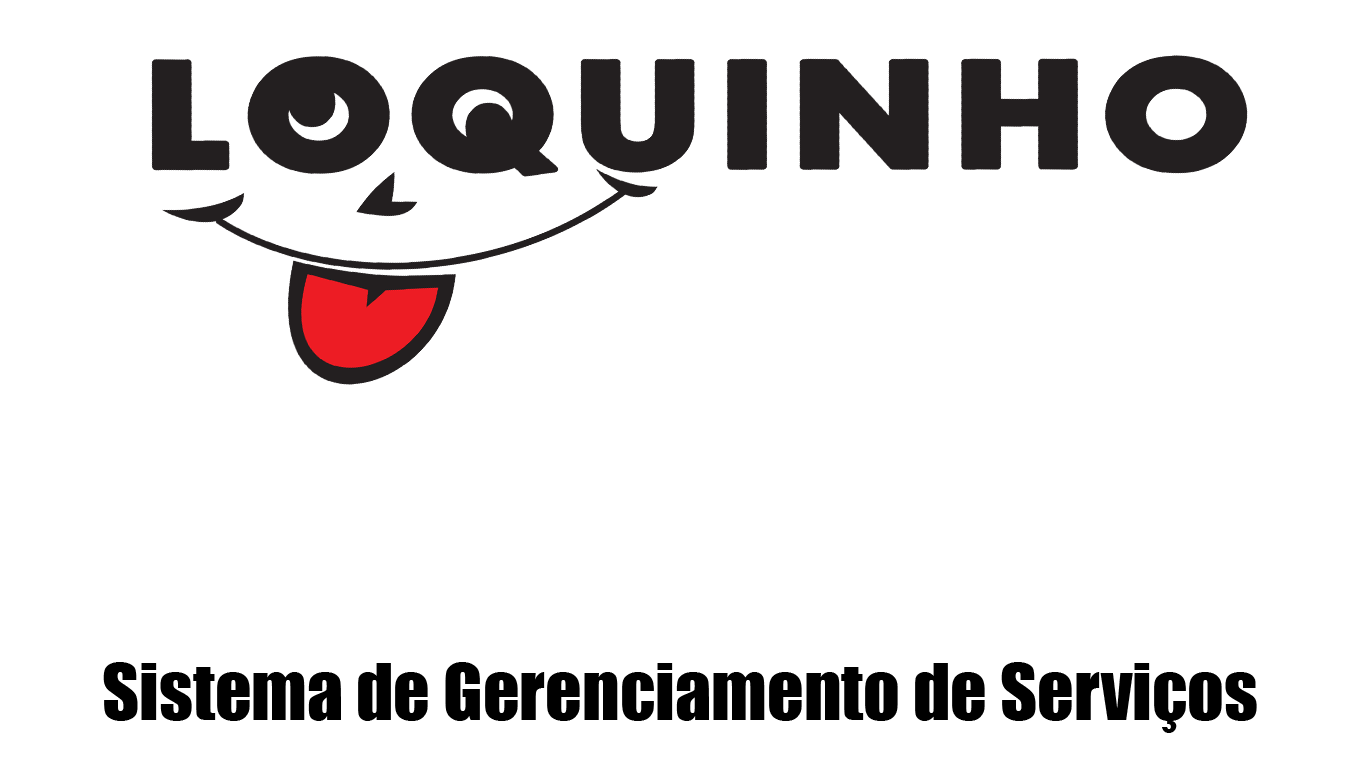
<style>
.page{position:relative;width:1366px;height:768px;background:#ffffff}
.page>*{position:absolute;margin:0}
.t1{font:72px "Impact";color:#000000}
</style>
<div class="page">
<p class="t1" style="left:103px;top:662px;width:1154px;height:71px">Sistema de Gerenciamento de Serviços</p>
</div>
